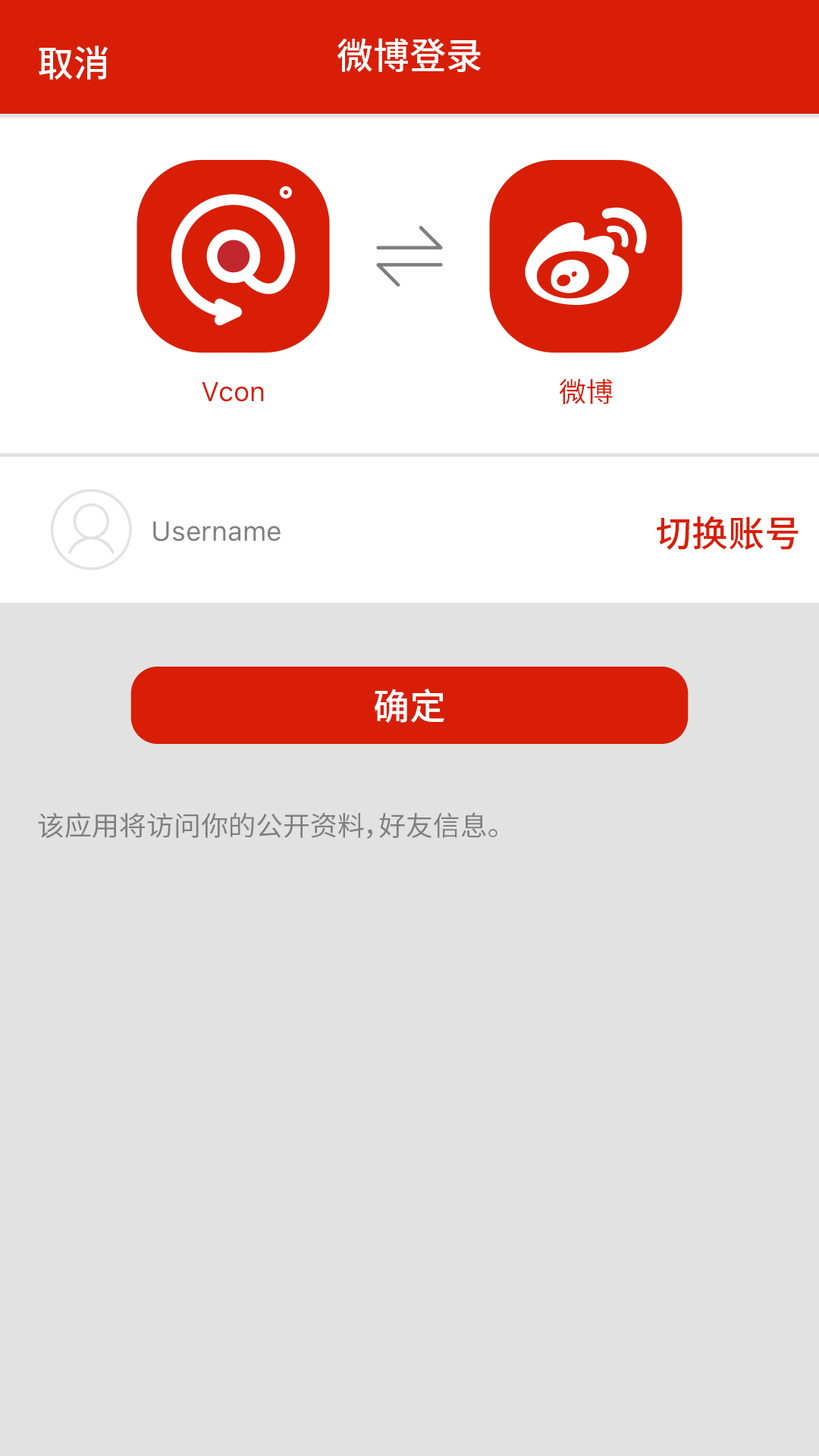
<style>
.page{position:relative;width:819px;height:1456px;background:#e2e2e2}
.page>*{position:absolute;margin:0}
.t1{font:36.4px "SourceHanSansCN-Medium";color:#ffffff}
.t2{font:27.3px "SFUIText-Regular";color:#d81e06}
.t3{font:27.3px "SourceHanSansCN-Regular";color:#d81e06}
.t4{font:27.3px "SFUIText-Regular";color:#7f7f7f}
.t5{font:36.4px "SourceHanSansCN-Medium";color:#d81e06}
.t6{font:27.3px "SourceHanSansCN-Regular";color:#7f7f7f}
</style>
<div class="page">
<p class="t1" style="left:337px;top:38px;width:144px;height:34px">微博登录</p>
<p class="t1" style="left:39px;top:45px;width:69px;height:35px">取消</p>
<p class="t2" style="left:202px;top:381px;width:62px;height:21px">Vcon</p>
<p class="t3" style="left:559px;top:378px;width:54px;height:26px">微博</p>
<p class="t4" style="left:153px;top:521px;width:128px;height:20px">Username</p>
<p class="t5" style="left:656px;top:516px;width:143px;height:34px">切换账号</p>
<p class="t1" style="left:374px;top:689px;width:70px;height:34px">确定</p>
<p class="t6" style="left:38px;top:812px;width:459px;height:27px">该应用将访问你的公开资料，好友信息。</p>
</div>
